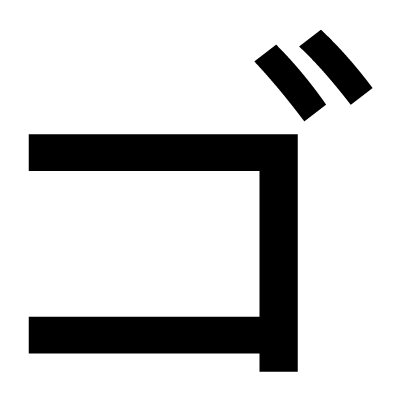
<style>
.page{position:relative;width:400px;height:400px;background:#ffffff}
.page>*{position:absolute;margin:0}
.t1{font:424.8px "MS-PGothic";color:#000000}
</style>
<div class="page">
<p class="t1" style="left:28px;top:29px;width:345px;height:343px">ゴ</p>
</div>
